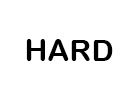
<style>
.page{position:relative;width:140px;height:100px;background:#ffffff}
.page>*{position:absolute;margin:0}
.t1{font:30px "ArialRoundedMTBold";letter-spacing:0.01em;color:#000000}
</style>
<div class="page">
<p class="t1" style="left:26px;top:39px;width:87px;height:22px">HARD</p>
</div>
